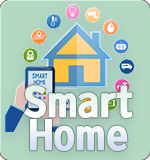
<style>
.page{position:relative;width:150px;height:160px}
.page>*{position:absolute;margin:0}
.t1{font:38.9px/33.3px "KoreanTITGD5-R";letter-spacing:-0.01em;color:#ffffff}
</style>
<div class="page">
<p class="t1" style="left:24px;top:85px;width:109px;height:66px;text-align:center">Smart<br>Home</p>
</div>
